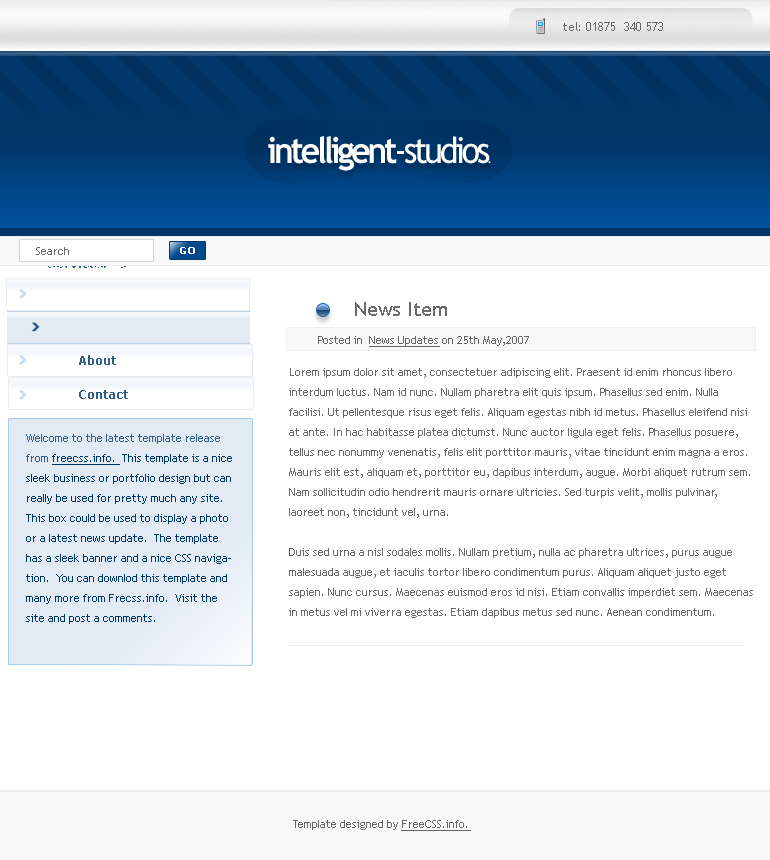
<style>
.page{position:relative;width:770px;height:860px;background:#ffffff}
.page>*{position:absolute;margin:0}
.t1{font:12px "TrebuchetMS";color:#666666}
.t2{font:36px "TrebuchetMS-Bold";letter-spacing:-0.095em;color:#ffffff;scale:0.94 1}
.t3{font:36px "TrebuchetMS";letter-spacing:-0.095em;color:#ffffff;scale:0.94 1}
.t4{font:14px "TrebuchetMS";letter-spacing:-0.095em;color:#ffffff;scale:0.94 1}
.t5{font:11px "TrebuchetMS";color:#666666}
.t6{font:10px "Verdana-Bold";color:#ffffff}
.t7{font:12px "Verdana-Bold"}
.t8{font:20px "TrebuchetMS";color:#6a6a6a}
.t9{font:11px "TrebuchetMS";color:#666666;text-decoration:underline}
.t10{font:12px "Verdana-Bold";color:#315e88}
.t11{font:11px/20px "TrebuchetMS";color:#6a6a6a}
.t12{font:11px/20px "TrebuchetMS";color:#003567}
.t13{font:11px/20px "TrebuchetMS";color:#315e88}
.t14{font:11px/20px "TrebuchetMS";color:#003567;text-decoration:underline}
</style>
<div class="page">
<p class="t1" style="left:563px;top:22px;width:100px;height:9px">tel: 01875  340 573</p>
<p class="t2" style="left:268px;top:136px;width:223px;height:35px">intelligent<span class="t3">-studios</span><span class="t4">.</span></p>
<p class="t5" style="left:36px;top:247px;width:33px;height:8px">Search</p>
<p class="t6" style="left:180px;top:247px;width:15px;height:7px">GO</p>
<p class="t7" style="left:48px;top:258px;width:55px;height:10px">Services</p>
<p class="t8" style="left:355px;top:302px;width:92px;height:14px">News Item</p>
<p class="t5" style="left:318px;top:336px;width:211px;height:11px">Posted in  <span class="t9">News Updates</span> on 25th May,2007</p>
<p class="t10" style="left:79px;top:355px;width:37px;height:10px">About</p>
<p class="t11" style="left:289px;top:368px;width:464px;height:250px">Lorem ipsum dolor sit amet, consectetuer adipiscing elit. Praesent id enim rhoncus libero interdum luctus. Nam id nunc. Nullam pharetra elit quis ipsum. Phasellus sed enim. Nulla facilisi. Ut pellentesque risus eget felis. Aliquam egestas nibh id metus. Phasellus eleifend nisi at ante. In hac habitasse platea dictumst. Nunc auctor ligula eget felis. Phasellus posuere, tellus nec nonummy venenatis, felis elit porttitor mauris, vitae tincidunt enim magna a eros. Mauris elit est, aliquam et, porttitor eu, dapibus interdum, augue. Morbi aliquet rutrum sem. Nam sollicitudin odio hendrerit mauris ornare ultricies. Sed turpis velit, mollis pulvinar, laoreet non, tincidunt vel, urna.<br><br>Duis sed urna a nisl sodales mollis. Nullam pretium, nulla ac pharetra ultrices, purus augue malesuada augue, et iaculis tortor libero condimentum purus. Aliquam aliquet justo eget sapien. Nunc cursus. Maecenas euismod eros id nisi. Etiam convallis imperdiet sem. Maecenas in metus vel mi viverra egestas. Etiam dapibus metus sed nunc. Aenean condimentum. Praesent elementum interdum tortor. Sed lacinia. Nulla ante arcu, cursus ac, iaculis sed, bibendum vitae, ante. Proin et tellus eget sem eleifend dignissim. Etiam volutpat tellus vitae lacus. Quisque mollis ligula non urna. Cras et pede.</p>
<p class="t10" style="left:79px;top:390px;width:49px;height:9px">Contact</p>
<p class="t12" style="left:26px;top:434px;width:206px;height:190px"><span class="t13">Welcome to the latest template release from </span><span class="t14">freecss.info. </span> This template is a nice sleek business or portfolio design but can really be used for pretty much any site.  This box could be used to display a photo or a latest news update.  The template has a sleek banner and a nice CSS navigation.  You can downlod this template and many more from Frecss.info.  Visit the site and post a comments.</p>
<p class="t5" style="left:293px;top:820px;width:178px;height:11px">Template designed by <span class="t9">FreeCSS.info.</span></p>
</div>
